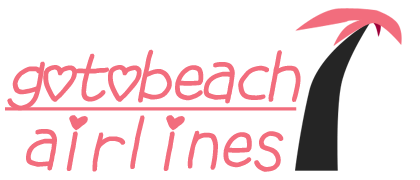
<style>
.page{position:relative;width:420px;height:180px;background:#ffffff}
.page>*{position:absolute;margin:0}
.t1{font:72px "S2G-love";letter-spacing:-0.08em;color:#f26d7d;font-weight:bold;font-style:italic;text-decoration:underline}
.t2{font:72px/67px "S2G-love";letter-spacing:-0.08em;color:#f26d7d;font-weight:bold;font-style:italic}
</style>
<div class="page">
<p class="t1" style="left:5px;top:49px;width:296px;height:123px;text-align:center">gotobeach<br><span class="t2">airlines</span></p>
</div>
